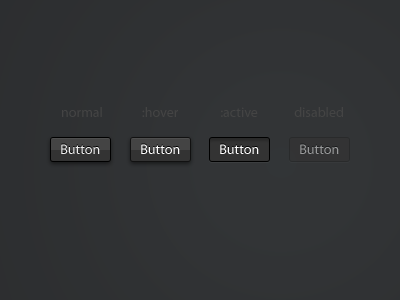
<style>
.page{position:relative;width:400px;height:300px;background:#313335}
.page>*{position:absolute;margin:0}
.t1{font:14px "MyriadPro-Regular";color:#444444}
.t2{font:14px "MyriadPro-Regular";color:#eeeeee}
.t3{font:14px "MyriadPro-Regular";color:#ffffff}
.t4{font:14px "MyriadPro-Regular";color:#999a9b}
</style>
<div class="page">
<p class="t1" style="left:62px;top:107px;width:40px;height:10px">normal</p>
<p class="t1" style="left:142px;top:107px;width:36px;height:10px">:hover</p>
<p class="t1" style="left:221px;top:107px;width:37px;height:10px">:active</p>
<p class="t1" style="left:294px;top:107px;width:49px;height:10px">disabled</p>
<p class="t2" style="left:61px;top:144px;width:39px;height:10px">Button</p>
<p class="t3" style="left:141px;top:144px;width:39px;height:10px">Button</p>
<p class="t3" style="left:220px;top:144px;width:39px;height:10px">Button</p>
<p class="t4" style="left:300px;top:144px;width:39px;height:10px">Button</p>
</div>
